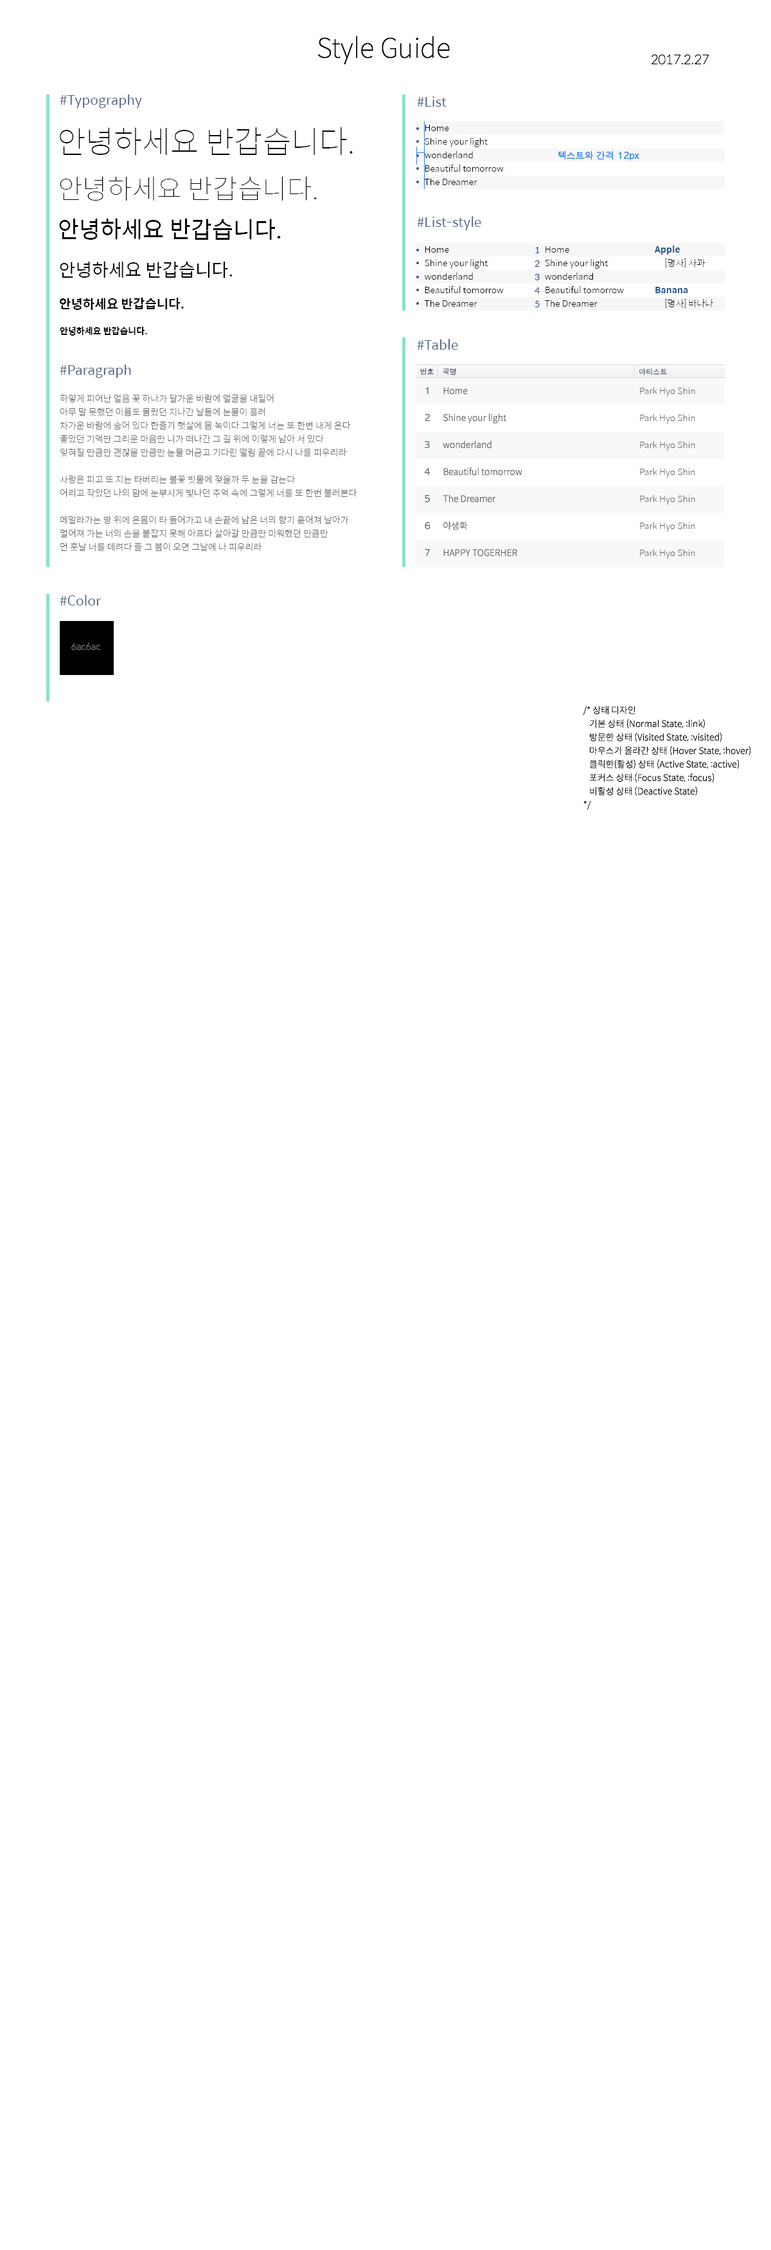
<style>
.page{position:relative;width:771px;height:2250px;background:#ffffff}
.page>*{position:absolute;margin:0}
.t1{font:27px "SpoqaHanSans-Thin";color:#000000}
.t2{font:12.9px "SpoqaHanSans-Thin";color:#000000}
.t3{font:13.5px "SpoqaHanSans-Regular";color:#576987}
.t4{font:9px "SpoqaHanSans-Light";color:#000000}
.t5{font:30.9px "SpoqaHanSans-Thin";color:#000000}
.t6{font:9px "AppleGothic";color:#2a80f4}
.t7{font:23.1px "SpoqaHanSans-Regular";color:#000000}
.t8{font:9px "SpoqaHanSans-Thin";color:#000000}
.t9{font:9px "SpoqaHanSans-Bold";color:#205596}
.t10{font:9px "SpoqaHanSans-Regular";color:#205596}
.t11{font:18px "SpoqaHanSans-Regular";color:#000000}
.t12{font:12.9px "SpoqaHanSans-Bold";color:#000000}
.t13{font:9px "SpoqaHanSans-Bold";color:#000000}
.t14{font:7.1px "AppleGothic"}
.t15{font:9px "AppleGothic";color:#666574}
.t16{font:9px "SpoqaHanSans-Light";color:#666666}
</style>
<div class="page">
<p class="t1" style="left:318px;top:36px;width:132px;height:29px">Style Guide</p>
<p class="t2" style="left:651px;top:54px;width:59px;height:11px">2017.2.27</p>
<p class="t3" style="left:60px;top:94px;width:82px;height:15px">#Typography</p>
<p class="t3" style="left:417px;top:96px;width:30px;height:11px">#List</p>
<p class="t4" style="left:424px;top:125px;width:80px;height:60px">Home<br>Shine your light<br>wonderland<br>Beautiful tomorrow<br>The Dreamer</p>
<p class="t5" style="left:60px;top:127px;width:293px;height:29px">안녕하세요 반갑습니다.</p>
<p class="t6" style="left:559px;top:151px;width:81px;height:10px">텍스트와 간격 12px</p>
<p class="t1" style="left:60px;top:176px;width:257px;height:25px">안녕하세요 반갑습니다.</p>
<p class="t7" style="left:59px;top:218px;width:222px;height:22px">안녕하세요 반갑습니다.</p>
<p class="t3" style="left:417px;top:216px;width:64px;height:15px">#List-style</p>
<p class="t8" style="left:654px;top:245px;width:60px;height:63px"><span class="t9">Apple<br></span>     [명사] 사과<br><br><span class="t9">Banana<br></span>     [명사] 바나나</p>
<p class="t4" style="left:424px;top:246px;width:80px;height:61px">Home<br>Shine your light<br>wonderland<br>Beautiful tomorrow<br>The Dreamer</p>
<p class="t10" style="left:535px;top:247px;width:6px;height:60px">1<br>2<br>3<br>4<br>5</p>
<p class="t4" style="left:545px;top:246px;width:79px;height:61px">Home<br>Shine your light<br>wonderland<br>Beautiful tomorrow<br>The Dreamer</p>
<p class="t11" style="left:60px;top:261px;width:173px;height:17px">안녕하세요 반갑습니다.</p>
<p class="t12" style="left:60px;top:298px;width:124px;height:12px">안녕하세요 반갑습니다.</p>
<p class="t13" style="left:60px;top:327px;width:87px;height:9px">안녕하세요 반갑습니다.</p>
<p class="t3" style="left:417px;top:339px;width:41px;height:11px">#Table</p>
<p class="t3" style="left:60px;top:364px;width:71px;height:14px">#Paragraph</p>
<p class="t14" style="left:420px;top:368px;width:14px;height:7px">번호</p>
<p class="t14" style="left:443px;top:368px;width:13px;height:7px">곡명</p>
<p class="t14" style="left:640px;top:368px;width:27px;height:7px">아티스트</p>
<p class="t15" style="left:424px;top:387px;width:7px;height:169px">1<br><br>2<br><br>3<br><br>4<br><br>5<br><br>6<br><br>7</p>
<p class="t16" style="left:443px;top:387px;width:80px;height:170px">Home<br><br>Shine your light<br><br>wonderland<br><br>Beautiful tomorrow<br><br>The Dreamer<br><br>야생화<br><br>HAPPY TOGERHER</p>
<p class="t16" style="left:640px;top:387px;width:56px;height:172px">Park Hyo Shin<br><br>Park Hyo Shin<br><br>Park Hyo Shin<br><br>Park Hyo Shin<br><br>Park Hyo Shin<br><br>Park Hyo Shin<br><br>Park Hyo Shin</p>
<p class="t16" style="left:60px;top:394px;width:297px;height:158px">하얗게 피어난 얼음 꽃 하나가 달가운 바람에 얼굴을 내밀어<br>아무 말 못했던 이름도 몰랐던 지나간 날들에 눈물이 흘러<br>차가운 바람에 숨어 있다 한줄기 햇살에 몸 녹이다 그렇게 너는 또 한번 내게 온다<br>좋았던 기억만 그리운 마음만 니가 떠나간 그 길 위에 이렇게 남아 서 있다<br>잊혀질 만큼만 괜찮을 만큼만 눈물 머금고 기다린 떨림 끝에 다시 나를 피우리라<br><br>사랑은 피고 또 지는 타버리는 불꽃 빗물에 젖을까 두 눈을 감는다<br>어리고 작았던 나의 맘에 눈부시게 빛나던 추억 속에 그렇게 너를 또 한번 불러본다<br><br>메말라가는 땅 위에 온몸이 타 들어가고 내 손끝에 남은 너의 향기 흩어져 날아가<br>멀어져 가는 너의 손을 붙잡지 못해 아프다 살아갈 만큼만 미워했던 만큼만<br>먼 훗날 너를 데려다 줄 그 봄이 오면 그날에 나 피우리라</p>
<p class="t3" style="left:60px;top:595px;width:42px;height:11px">#Color</p>
<p class="t16" style="left:71px;top:643px;width:29px;height:8px">6ac6ac</p>
<p class="t4" style="left:583px;top:706px;width:168px;height:104px">/* 상태 디자인 <br>   기본 상태 (Normal State, :link)<br>   방문한 상태 (Visited State, :visited)<br>   마우스가 올라간 상태 (Hover State, :hover)<br>   클릭한(활성) 상태 (Active State, :active)<br>   포커스 상태 (Focus State, :focus)<br>   비활성 상태 (Deactive State)<br>*/</p>
</div>
